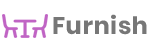
<style>
.page{position:relative;width:150px;height:50px;background:#ffffff}
.page>*{position:absolute;margin:0}
.t1{font:24px "Poppins-Bold";letter-spacing:0.025em;color:#777777}
</style>
<div class="page">
<p class="t1" style="left:53px;top:14px;width:94px;height:21px">Furnish</p>
</div>
